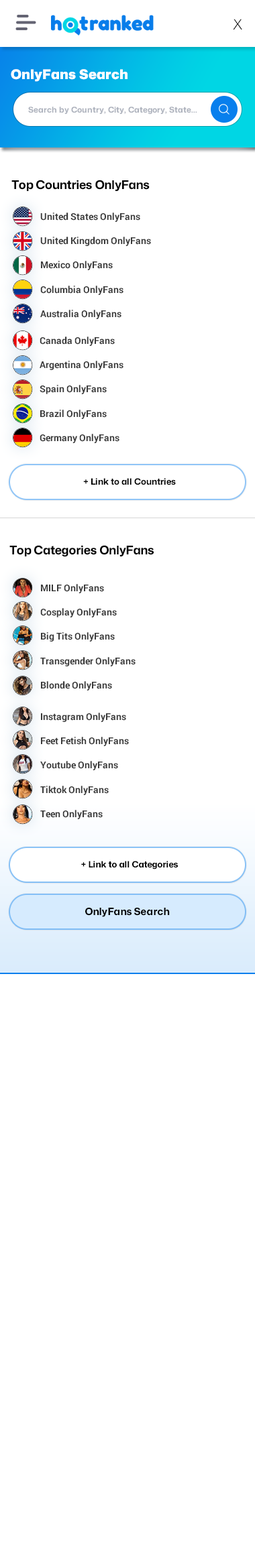
<style>
.page{position:relative;width:255px;height:1568px;background:#ffffff}
.page>*{position:absolute;margin:0}
.t1{font:14.1px "MonaSans-Light";letter-spacing:-0.01em;color:#000000}
.t2{font:13.4px "MonaSans-Black";color:#ffffff}
.t3{font:8px "MonaSans-Bold";color:#adb2bd}
.t4{font:12.1px "MonaSans-Bold";letter-spacing:-0.01em;color:#000000}
.t5{font:9.4px/24.4px "Roboto-Bold";color:#3a3a3a}
.t6{font:8.7px "MonaSans-Bold";color:#000000}
.t7{font:10.1px "MonaSans-Bold";color:#000000}
</style>
<div class="page">
<p class="t1" style="left:233px;top:19px;width:9px;height:10px">X</p>
<p class="t2" style="left:11px;top:69px;width:116px;height:13px">OnlyFans Search</p>
<p class="t3" style="left:28px;top:107px;width:169px;height:8px">Search by Country, City, Category, State...</p>
<p class="t4" style="left:11px;top:180px;width:138px;height:11px">Top Countries OnlyFans</p>
<p class="t5" style="left:40px;top:213px;width:111px;height:106px">United States OnlyFans<br>United Kingdom OnlyFans<br>Mexico OnlyFans<br>Columbia OnlyFans<br>Australia OnlyFans</p>
<p class="t5" style="left:40px;top:337px;width:83px;height:106px">Canada OnlyFans<br>Argentina OnlyFans<br>Spain OnlyFans<br>Brazil OnlyFans<br>Germany OnlyFans</p>
<p class="t6" style="left:83px;top:478px;width:93px;height:7px">+ Link to all Countries</p>
<p class="t4" style="left:9px;top:545px;width:145px;height:12px">Top Categories OnlyFans</p>
<p class="t5" style="left:40px;top:584px;width:95px;height:106px">MILF OnlyFans<br>Cosplay OnlyFans<br>Big Tits OnlyFans<br>Transgender OnlyFans<br>Blonde OnlyFans</p>
<p class="t5" style="left:40px;top:713px;width:89px;height:106px">Instagram OnlyFans<br>Feet Fetish OnlyFans<br>Youtube OnlyFans<br>Tiktok OnlyFans<br>Teen OnlyFans</p>
<p class="t6" style="left:81px;top:861px;width:97px;height:8px">+ Link to all Categories</p>
<p class="t7" style="left:85px;top:908px;width:85px;height:9px">OnlyFans Search</p>
</div>
